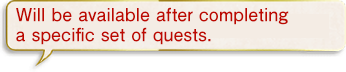
<style>
.page{position:relative;width:346px;height:72px;background:#f4ece4}
.page>*{position:absolute;margin:0}
.t1{font:18px/20px "FutoGoB101Pr5-Bold";color:#bd0800}
</style>
<div class="page">
<p class="t1" style="left:16px;top:7px;width:273px;height:38px">Will be available after completing<br>a specific set of quests.</p>
</div>
